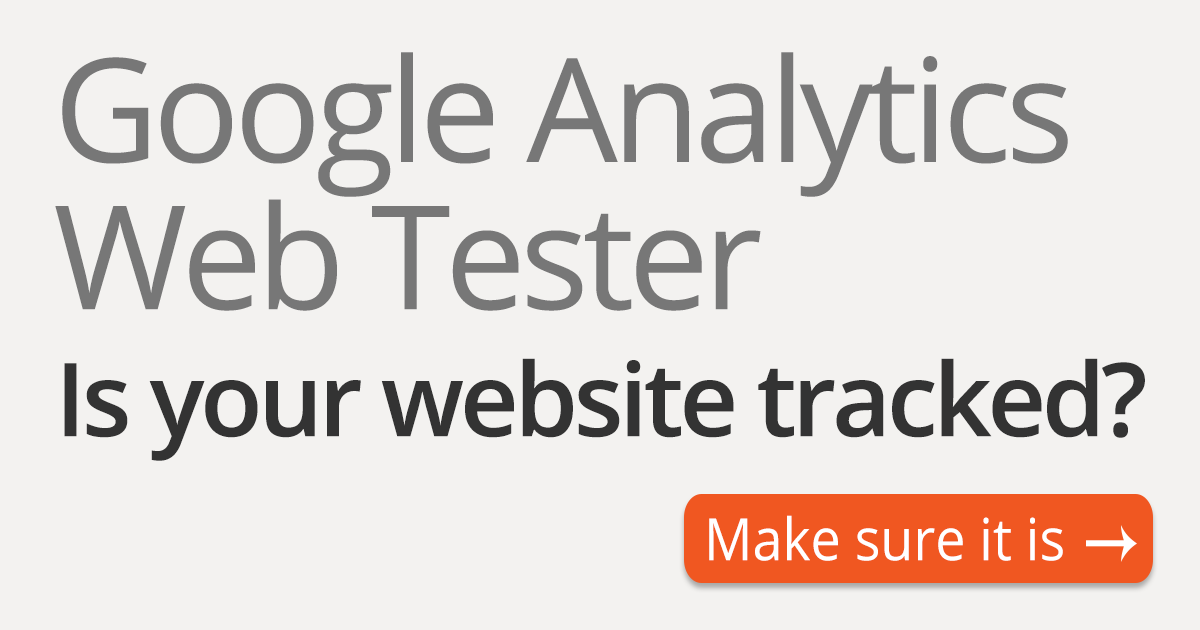
<style>
.page{position:relative;width:1200px;height:630px;background:#f3f2f0}
.page>*{position:absolute;margin:0}
.t1{font:144.3px/147.1px "OpenSans";letter-spacing:-0.04em;color:#777777}
.t2{font:101.7px "OpenSans-Semibold";letter-spacing:-0.04em;color:#333333}
.t3{font:58.5px "OpenSans";color:#ffffff;scale:0.92 1}
</style>
<div class="page">
<p class="t1" style="left:55px;top:52px;width:1013px;height:259px">Google Analytics<br>Web Tester</p>
<p class="t2" style="left:64px;top:358px;width:1081px;height:103px">Is your website tracked?</p>
<p class="t3" style="left:709px;top:515px;width:354px;height:46px">Make sure it is</p>
</div>
